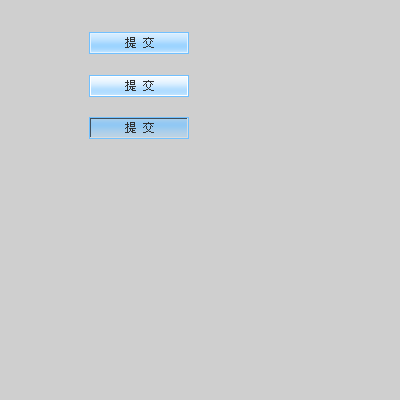
<style>
.page{position:relative;width:400px;height:400px;background:#cfcfcf}
.page>*{position:absolute;margin:0}
.t1{font:12px "SimSun";color:#303030}
</style>
<div class="page">
<p class="t1" style="left:125px;top:37px;width:29px;height:11px">提 交</p>
<p class="t1" style="left:125px;top:80px;width:29px;height:11px">提 交</p>
<p class="t1" style="left:125px;top:122px;width:29px;height:11px">提 交</p>
</div>
